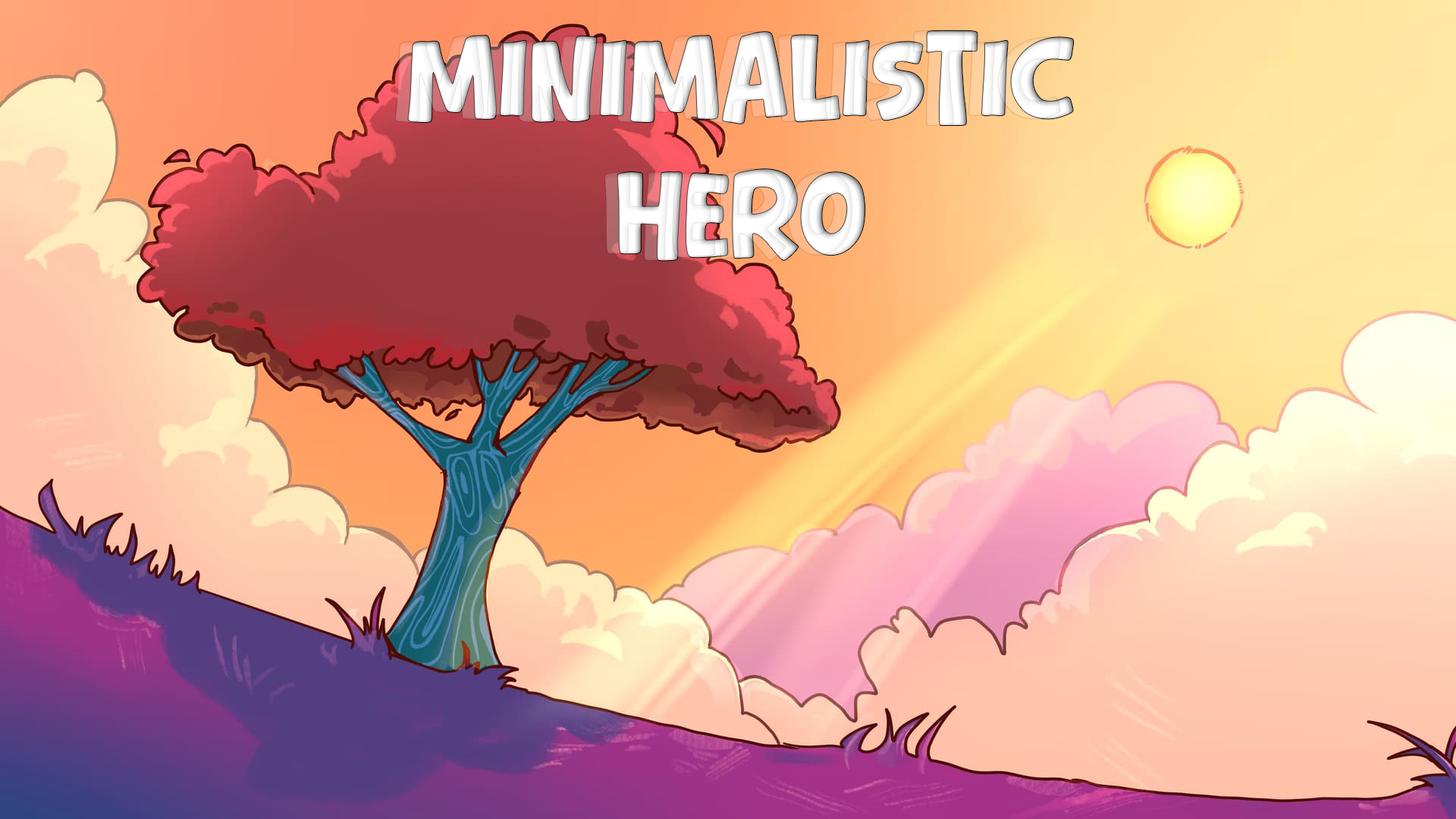
<style>
.page{position:relative;width:1456px;height:819px}
.page>*{position:absolute;margin:0}
.t1{font:113.7px "Bear-Days"}
.t2{font:113.7px "Bear-Days";color:#ffffff}
</style>
<div class="page">
<p class="t1" style="left:394px;top:30px;width:668px;height:232px;text-align:center">MiniMalistic hero</p>
<p class="t2" style="left:407px;top:30px;width:668px;height:232px;text-align:center">MiniMalistic hero</p>
</div>
